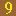
<style>
.page{position:relative;width:16px;height:16px;background:#996633}
.page>*{position:absolute;margin:0}
.t1{font:18px "Sylfaen";color:#f5e814}
</style>
<div class="page">
<p class="t1" style="left:5px;top:2px;width:7px;height:12px">9</p>
</div>
